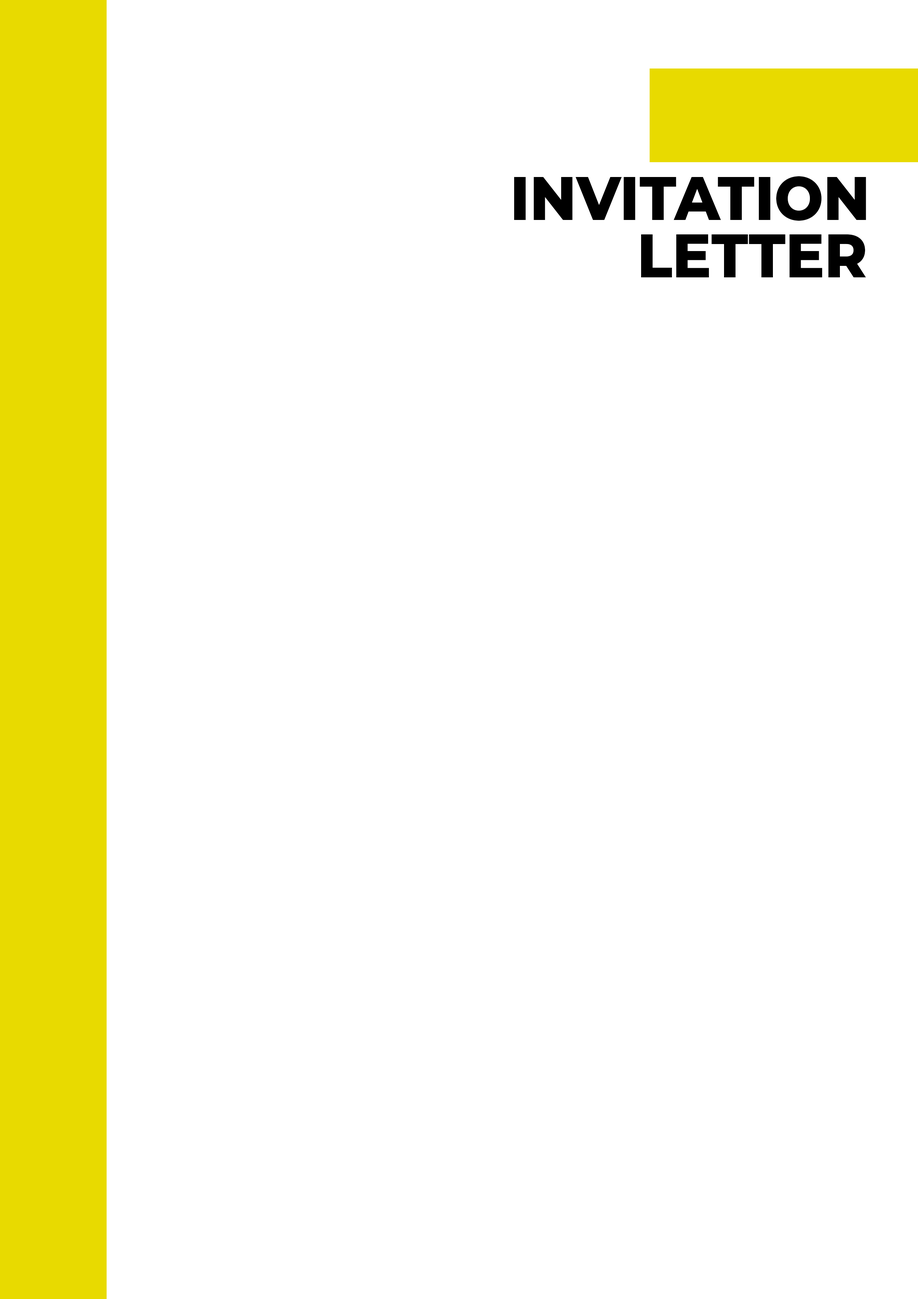
<style>
.page{position:relative;width:918px;height:1299px;background:#ffffff}
.page>*{position:absolute;margin:0}
.t1{font:61.5px "Montserrat-ExtraBold";color:#000000;scale:0.94 1}
</style>
<div class="page">
<p class="t1" style="left:514px;top:176px;width:352px;height:45px">INVITATION</p>
<p class="t1" style="left:641px;top:234px;width:225px;height:44px">LETTER</p>
</div>
